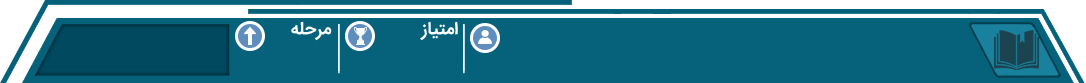
<style>
.page{position:relative;width:1086px;height:83px;background:#06617b}
.page>*{position:absolute;margin:0}
.t1{font:17.8px "IRANSans-Bold";color:#ffffff}
</style>
<div class="page">
<p class="t1" style="left:291px;top:21px;width:41px;height:20px">مرحله</p>
<p class="t1" style="left:420px;top:21px;width:38px;height:20px">امتیاز</p>
</div>
